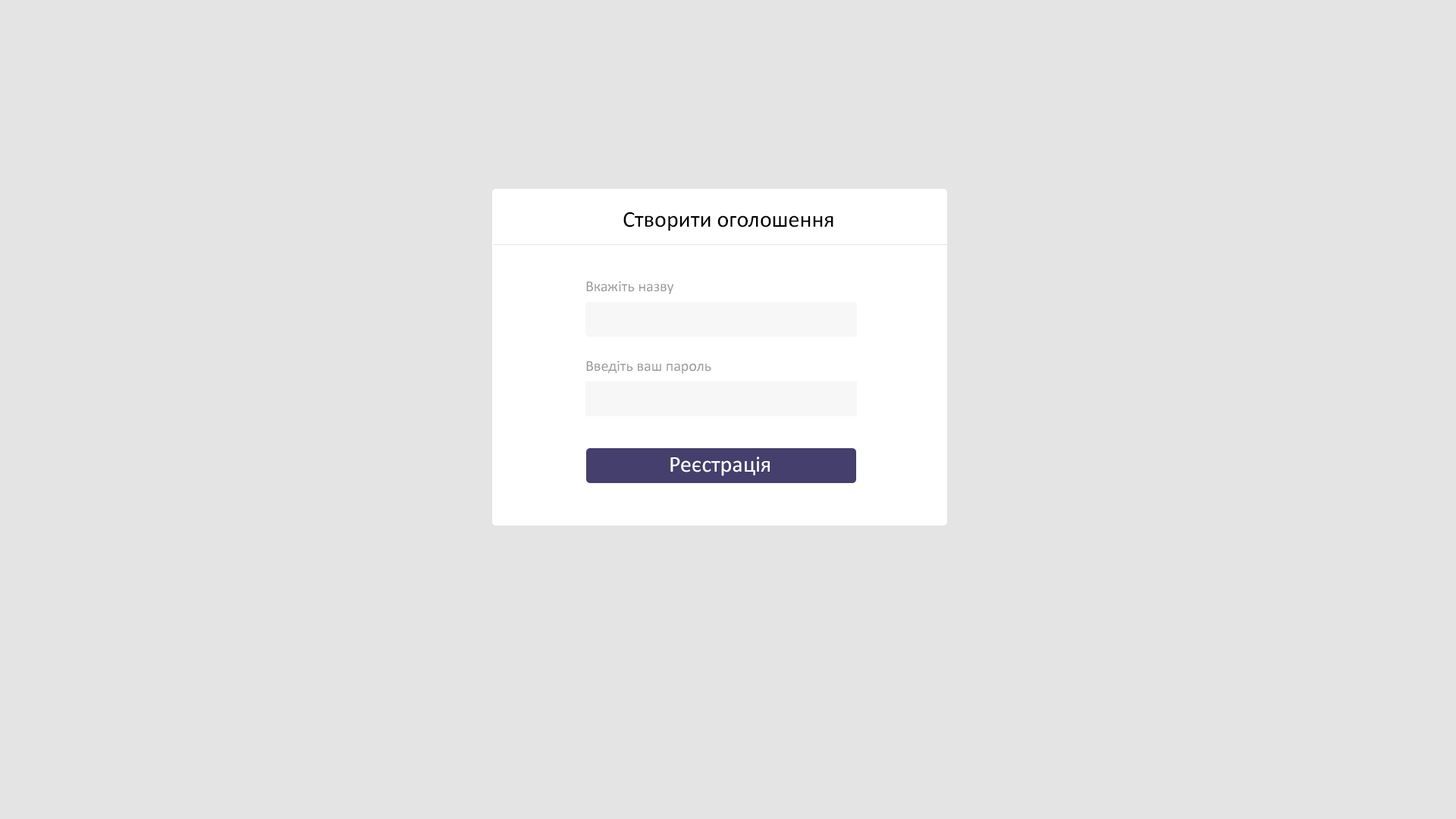
<style>
.page{position:relative;width:1456px;height:819px;background:#e4e4e4}
.page>*{position:absolute;margin:0}
.t1{font:22.7px "Calibri";color:#000000}
.t2{font:15.2px "Calibri";color:#9a9a9a}
.t3{font:22.7px "Calibri";color:#ffffff}
</style>
<div class="page">
<p class="t1" style="left:623px;top:212px;width:210px;height:19px">Створити оголошення</p>
<p class="t2" style="left:586px;top:281px;width:88px;height:13px">Вкажіть назву</p>
<p class="t2" style="left:586px;top:361px;width:125px;height:13px">Введіть ваш пароль</p>
<p class="t3" style="left:670px;top:457px;width:100px;height:19px">Реєстрація</p>
</div>
